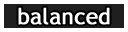
<style>
.page{position:relative;width:128px;height:32px;background:#ffffff}
.page>*{position:absolute;margin:0}
.t1{font:22px "TrebuchetMS";color:#ffffff;font-weight:bold}
</style>
<div class="page">
<p class="t1" style="left:18px;top:7px;width:92px;height:18px">balanced</p>
</div>
